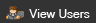
<style>
.page{position:relative;width:96px;height:23px;background:#333333}
.page>*{position:absolute;margin:0}
.t1{font:12px "MicrosoftSansSerif";color:#ffffff}
</style>
<div class="page">
<p class="t1" style="left:29px;top:9px;width:61px;height:9px">View Users</p>
</div>
